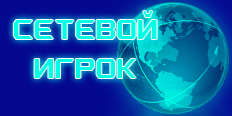
<style>
.page{position:relative;width:232px;height:116px;background:#040990}
.page>*{position:absolute;margin:0}
.t1{font:32.3px "AeromaticsNC";color:#00ffe5;scale:0.7 1}
</style>
<div class="page">
<p class="t1" style="left:13px;top:11px;width:144px;height:67px;text-align:center">сетевой<br>игрок</p>
</div>
